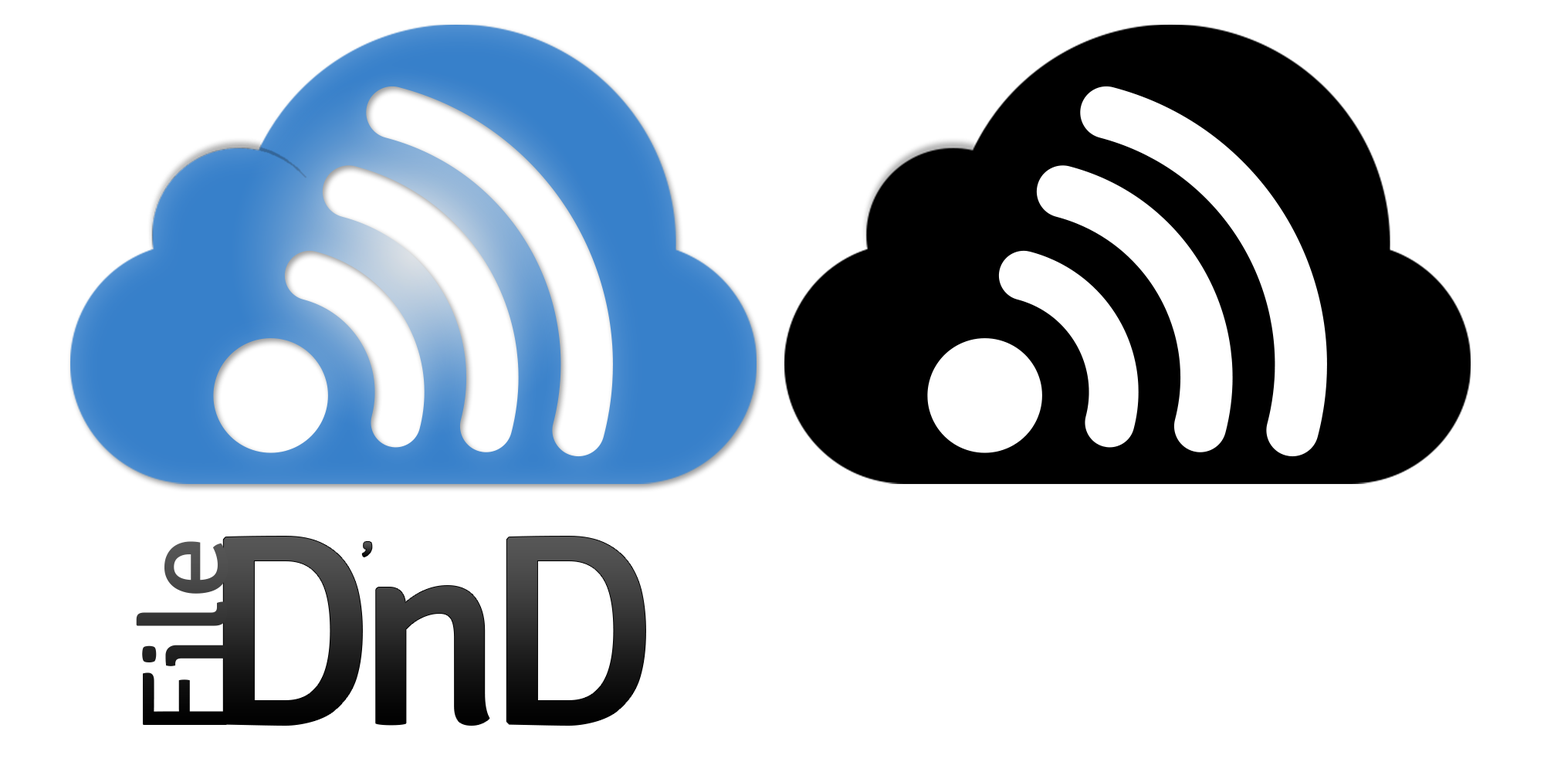
<style>
.page{position:relative;width:1544px;height:772px;background:#ffffff}
.page>*{position:absolute;margin:0}
.t1{font:122.3px "Signika-Regular";scale:1.04 1}
.t2{font:269.8px "Signika-Regular";letter-spacing:-0.1em;font-weight:bold}
.t3{font:55.6px "Signika-Regular"}
</style>
<div class="page">
<p class="t1" style="left:136px;top:541px;width:93px;height:184px;rotate:-90deg">File</p>
<p class="t2" style="left:223px;top:537px;width:423px;height:188px">DnD</p>
<p class="t3" style="left:362px;top:542px;width:10px;height:15px">’</p>
</div>
